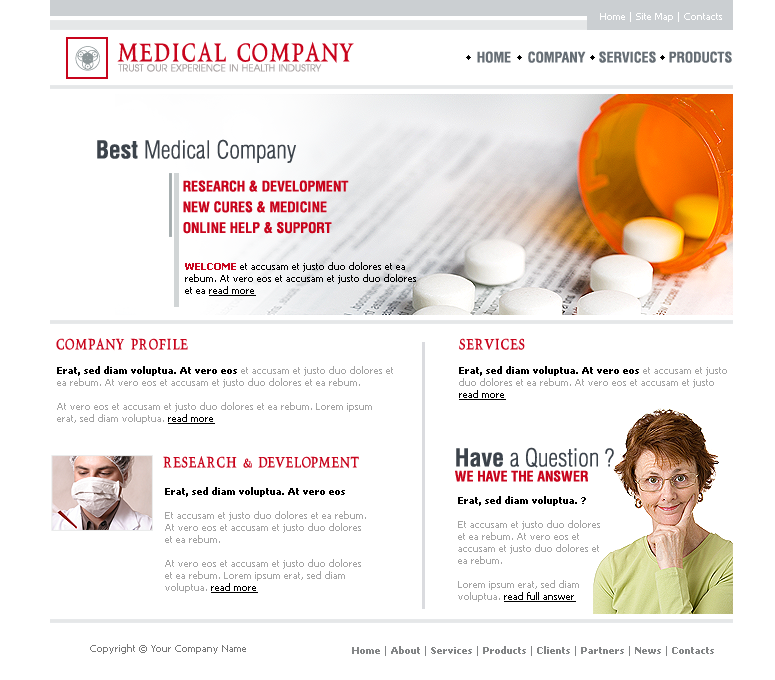
<style>
.page{position:relative;width:775px;height:680px;background:#ffffff}
.page>*{position:absolute;margin:0}
.t1{font:10px "Tahoma";color:#ffffff}
.t2{font:24px "VTCSwitchbladeRomanceTall";color:#c8041c}
.t3{font:14px "Helvetica-Condensed-Bold";color:#666e75;text-transform:uppercase}
.t4{font:9.6px "Avian";color:#aca6a6;text-transform:uppercase}
.t5{font:24px "Helvetica-Condensed-Light";color:#3c434b}
.t6{font:24px "Helvetica-Condensed-Bold";color:#3c434b}
.t7{font:14px/20.7px "Helvetica-Condensed-Bold";color:#c8041c;text-transform:uppercase}
.t8{font:10px "Tahoma";color:#000000}
.t9{font:10px "Tahoma-Bold";color:#c8041c}
.t10{font:10px "Tahoma";color:#000000;text-decoration:underline}
.t11{font:14px "VTCSwitchbladeRomanceTall";color:#c8041c}
.t12{font:10px "Tahoma";color:#a4a4a4}
.t13{font:10px "Tahoma-Bold";color:#000000}
.t14{font:14px "Helvetica-Condensed-Bold";color:#c8041c;text-transform:uppercase}
.t15{font:10px "Tahoma";color:#777777}
.t16{font:10px "Tahoma-Bold";color:#848687}
.t17{font:10px "Tahoma";color:#848687}
</style>
<div class="page">
<p class="t1" style="left:600px;top:12px;width:122px;height:10px">Home | Site Map | Contacts</p>
<p class="t2" style="left:117px;top:41px;width:237px;height:22px">MEDICAL COMPANY</p>
<p class="t3" style="left:477px;top:51px;width:34px;height:12px">HOME</p>
<p class="t3" style="left:528px;top:51px;width:58px;height:12px">COMPANY</p>
<p class="t3" style="left:599px;top:51px;width:57px;height:12px">SERVICES</p>
<p class="t3" style="left:669px;top:51px;width:63px;height:12px">PRODUCTS</p>
<p class="t4" style="left:118px;top:64px;width:204px;height:8px">TRUST OUR EXPERIENCE IN HEALTH INDUSTRY</p>
<p class="t5" style="left:97px;top:139px;width:199px;height:24px"><span class="t6">Best </span>Medical Company</p>
<p class="t7" style="left:183px;top:180px;width:166px;height:54px">RESEARCH &amp; DEVELOPMENT<br>NEW CURES &amp; MEDICINE<br>ONLINE HELP &amp; SUPPORT</p>
<p class="t8" style="left:185px;top:262px;width:231px;height:34px"><span class="t9">WELCOME </span>et accusam et justo duo dolores et ea rebum. At vero eos et accusam et justo duo dolores et ea <span class="t10">read more</span></p>
<p class="t11" style="left:56px;top:338px;width:132px;height:13px">COMPANY PROFILE</p>
<p class="t11" style="left:459px;top:338px;width:66px;height:12px">SERVICES</p>
<p class="t12" style="left:57px;top:366px;width:336px;height:58px"><span class="t13">Erat, sed diam voluptua. At vero eos </span>et accusam et justo duo dolores et ea rebum. At vero eos et accusam et justo duo dolores et ea rebum. <br><br>At vero eos et accusam et justo duo dolores et ea rebum. Lorem ipsum erat, sed diam voluptua. <span class="t10">read more</span></p>
<p class="t12" style="left:459px;top:366px;width:268px;height:34px"><span class="t13">Erat, sed diam voluptua. At vero eos </span>et accusam et justo duo dolores et ea rebum. At vero eos et accusam et justo <br><span class="t10">read more</span></p>
<p class="t5" style="left:456px;top:447px;width:158px;height:21px"><span class="t6">Have </span>a Question ?</p>
<p class="t11" style="left:163px;top:456px;width:196px;height:13px">RESEARCH &amp; DEVELOPMENT</p>
<p class="t14" style="left:455px;top:470px;width:133px;height:12px">we have the answer</p>
<p class="t12" style="left:165px;top:487px;width:201px;height:106px"><span class="t13">Erat, sed diam voluptua. At vero eos <br></span><br>Et accusam et justo duo dolores et ea rebum. At vero eos et accusam et justo duo dolores et ea rebum. <br><br>At vero eos et accusam et justo duo dolores et ea rebum. Lorem ipsum erat, sed diam voluptua. <span class="t10">read more</span></p>
<p class="t12" style="left:458px;top:496px;width:142px;height:106px"><span class="t13">Erat, sed diam voluptua. ?<br></span><br>Et accusam et justo duo dolores et ea rebum. At vero eos et accusam et justo duo dolores et ea rebum. <br><br>Lorem ipsum erat, sed diam voluptua. <span class="t10">read full answer</span></p>
<p class="t15" style="left:90px;top:644px;width:156px;height:10px">Copyright © Your Company Name</p>
<p class="t16" style="left:352px;top:646px;width:362px;height:10px"><span class="t17">  </span>Home<span class="t17"> | </span>About <span class="t17">| </span>Services <span class="t17">| </span>Products <span class="t17">| </span>Clients <span class="t17">| </span>Partners <span class="t17">| </span>News <span class="t17">| </span>Contacts</p>
</div>
